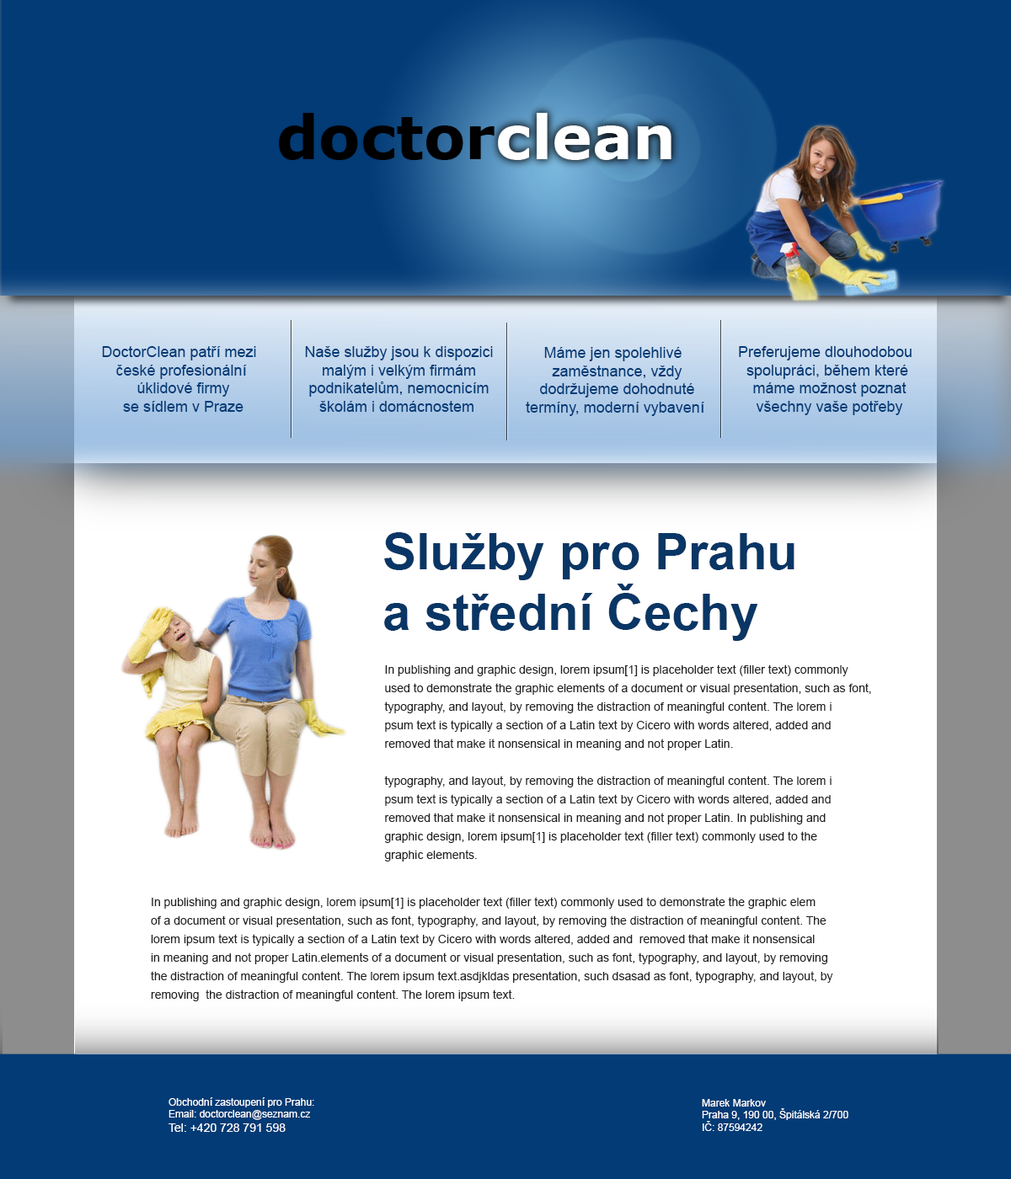
<style>
.page{position:relative;width:1011px;height:1179px;background:#ffffff}
.page>*{position:absolute;margin:0}
.t1{font:15.2px "ArialMT";color:#023b76}
.t2{font:50.5px "Arial-BoldMT";color:#093665}
.t3{font:11.8px/18.5px "ArialMT";color:#222222}
.t4{font:10.1px "ArialMT";color:#ffffff}
.t5{font:11.8px "ArialMT";color:#ffffff}
</style>
<div class="page">
<p class="t1" style="left:102px;top:346px;width:154px;height:66px;text-align:center">DoctorClean patří mezi<br> české profesionální <br>úklidové firmy <br>se sídlem v Praze</p>
<p class="t1" style="left:305px;top:346px;width:188px;height:66px;text-align:center">Naše služby jsou k dispozici <br>malým i velkým firmám <br>podnikatelům, nemocnicím <br>školám i domácnostem</p>
<p class="t1" style="left:526px;top:347px;width:178px;height:69px;text-align:center">Máme jen spolehlivé <br>zaměstnance, vždy <br>dodržujeme dohodnuté <br>termíny, moderní vybavení</p>
<p class="t1" style="left:739px;top:346px;width:173px;height:69px;text-align:center">Preferujeme dlouhodobou<br> spolupráci, během které <br>máme možnost poznat <br>všechny vaše potřeby</p>
<p class="t2" style="left:384px;top:532px;width:410px;height:109px">Služby pro Prahu <br>a střední Čechy</p>
<p class="t3" style="left:384px;top:665px;width:487px;height:197px">In publishing and graphic design, lorem ipsum[1] is placeholder text (filler text) commonly <br>used to demonstrate the graphic elements of a document or visual presentation, such as font,<br>typography, and layout, by removing the distraction of meaningful content. The lorem i<br>psum text is typically a section of a Latin text by Cicero with words altered, added and <br>removed that make it nonsensical in meaning and not proper Latin.<br><br>typography, and layout, by removing the distraction of meaningful content. The lorem i<br>psum text is typically a section of a Latin text by Cicero with words altered, added and <br>removed that make it nonsensical in meaning and not proper Latin. In publishing and <br>graphic design, lorem ipsum[1] is placeholder text (filler text) commonly used to the <br>graphic elements.</p>
<p class="t3" style="left:151px;top:897px;width:682px;height:105px">In publishing and graphic design, lorem ipsum[1] is placeholder text (filler text) commonly used to demonstrate the graphic elem <br>of a document or visual presentation, such as font, typography, and layout, by removing the distraction of meaningful content. The <br>lorem ipsum text is typically a section of a Latin text by Cicero with words altered, added and  removed that make it nonsensical <br>in meaning and not proper Latin.elements of a document or visual presentation, such as font, typography, and layout, by removing <br>the distraction of meaningful content. The lorem ipsum text.asdjkldas presentation, such dsasad as font, typography, and layout, by <br>removing  the distraction of meaningful content. The lorem ipsum text.</p>
<p class="t4" style="left:168px;top:1098px;width:146px;height:34px">Obchodní zastoupení pro Prahu:<br>Email: doctorclean@seznam.cz<br><span class="t5">Tel: +420 728 791 598</span></p>
<p class="t4" style="left:702px;top:1099px;width:146px;height:32px">Marek Markov<br>Praha 9, 190 00, Špitálská 2/700<br>IČ: 87594242</p>
</div>
